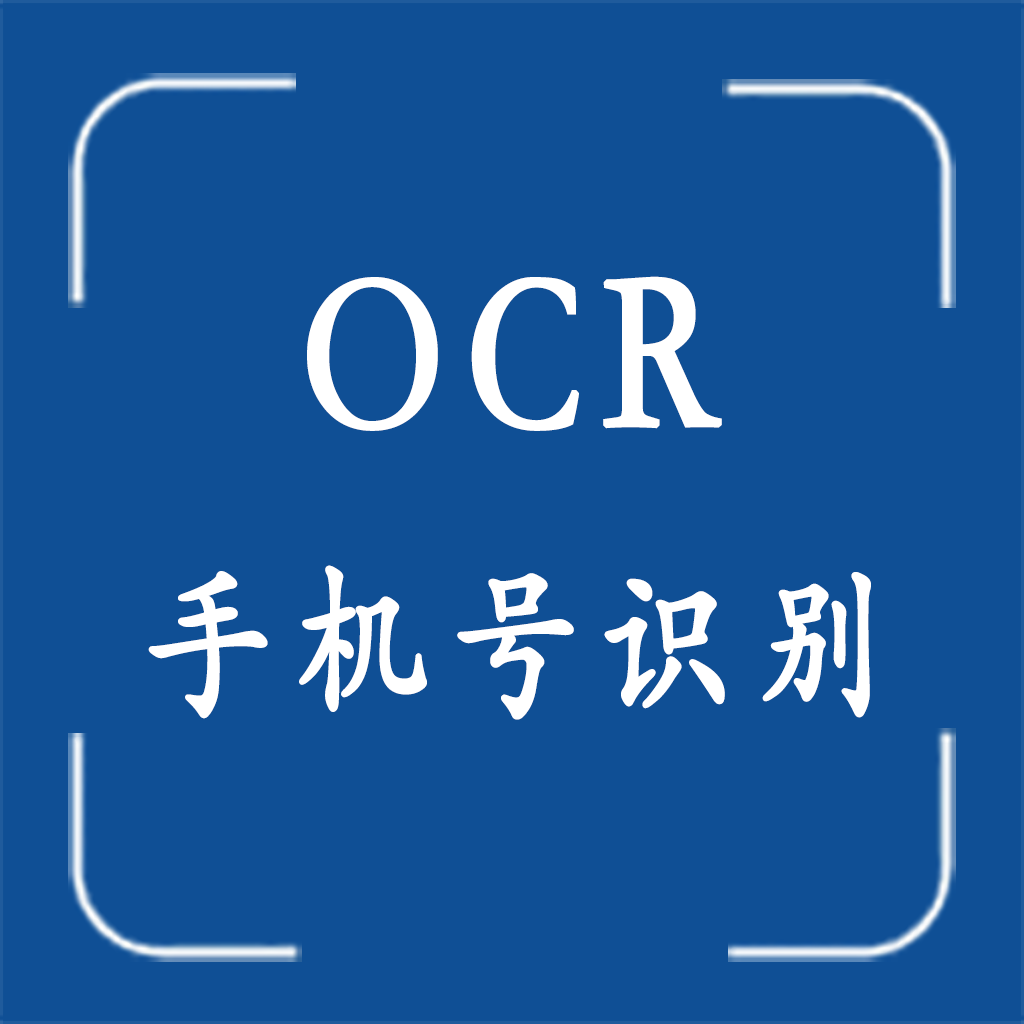
<style>
.page{position:relative;width:1024px;height:1024px;background:#0f4f95}
.page>*{position:absolute;margin:0}
.t1{font:227.6px "STFangsong";letter-spacing:0.1em;color:#ffffff;font-weight:bold;scale:0.8 1}
.t2{font:170.7px "STKaiti";letter-spacing:0.1em;color:#ffffff;font-weight:bold;scale:0.8 1}
</style>
<div class="page">
<p class="t1" style="left:307px;top:276px;width:415px;height:155px">OCR</p>
<p class="t2" style="left:148px;top:565px;width:723px;height:155px">手机号识别</p>
</div>
